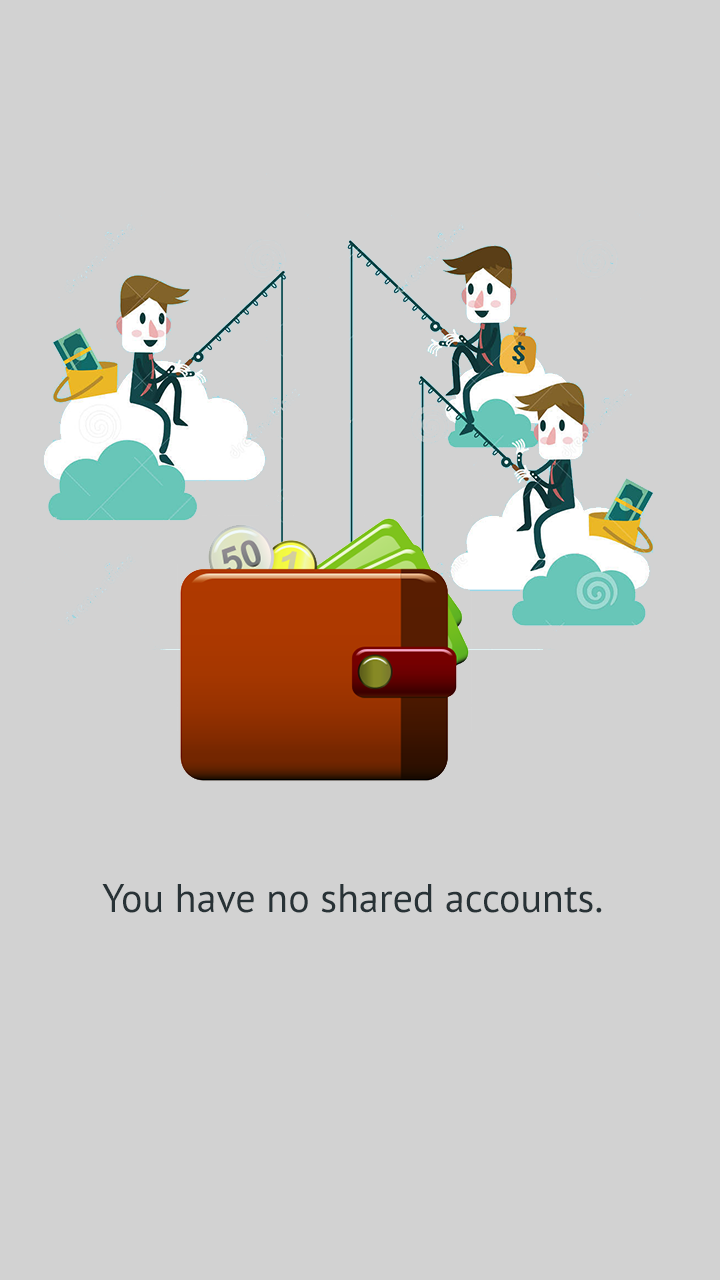
<style>
.page{position:relative;width:720px;height:1280px;background:#d2d2d2}
.page>*{position:absolute;margin:0}
.t1{font:40px "PTSans-Regular";color:#283236}
</style>
<div class="page">
<p class="t1" style="left:102px;top:884px;width:500px;height:29px">You have no shared accounts.</p>
</div>
